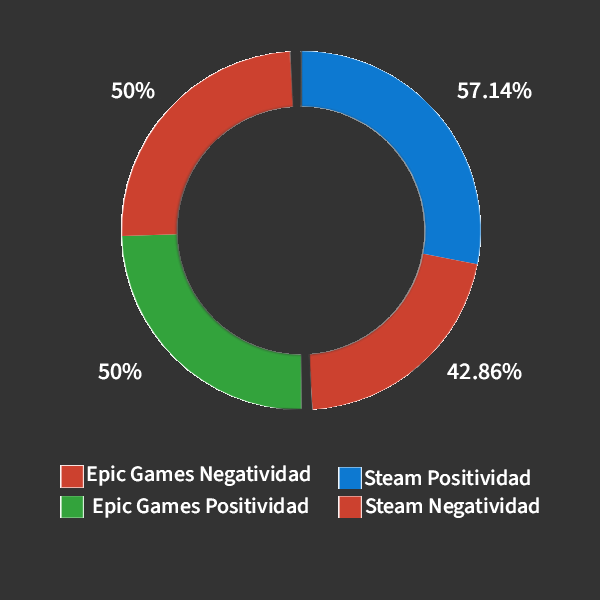
<style>
.page{position:relative;width:600px;height:600px;background:#333333}
.page>*{position:absolute;margin:0}
.t1{font:24px "SourceSans3Roman_511.000wght";color:#ffffff}
.t2{font:22px "SourceSans3Roman_511.000wght";color:#ffffff}
</style>
<div class="page">
<p class="t1" style="left:111px;top:82px;width:44px;height:17px">50%</p>
<p class="t1" style="left:457px;top:82px;width:75px;height:17px">57.14%</p>
<p class="t1" style="left:98px;top:363px;width:44px;height:17px">50%</p>
<p class="t1" style="left:447px;top:363px;width:75px;height:17px">42.86%</p>
<p class="t2" style="left:87px;top:465px;width:223px;height:21px">Epic Games Negatividad</p>
<p class="t2" style="left:364px;top:469px;width:166px;height:17px">Steam Positividad</p>
<p class="t2" style="left:93px;top:497px;width:215px;height:21px">Epic Games Positividad</p>
<p class="t2" style="left:365px;top:497px;width:174px;height:21px">Steam Negatividad</p>
</div>
